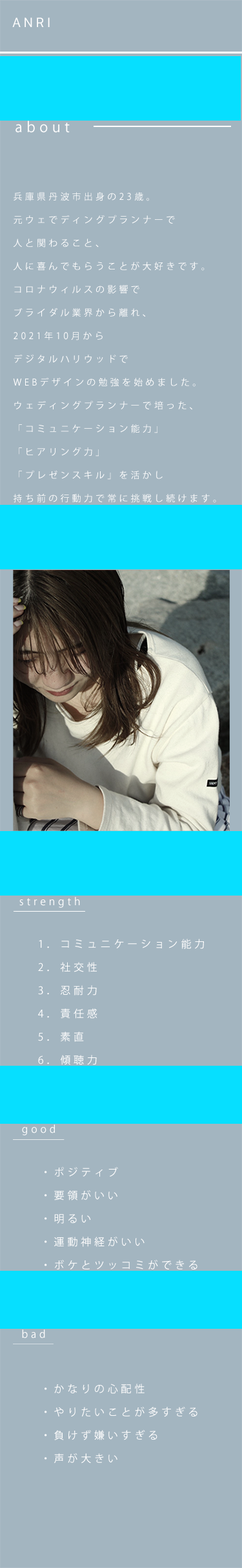
<style>
.page{position:relative;width:242px;height:1568px;background:#a3b5c0}
.page>*{position:absolute;margin:0}
.t1{font:12.9px "Galvji";letter-spacing:0.2em;color:#ffffff}
.t2{font:14.2px "KozGoPr6N-Regular";letter-spacing:0.3em;color:#ffffff}
.t3{font:9px/23.2px "KozGoPr6N-Regular";letter-spacing:0.3em;color:#ffffff}
.t4{font:10.3px "KozGoPr6N-Regular";letter-spacing:0.3em;color:#ffffff}
.t5{font:10.3px/23.2px "KozGoPr6N-Regular";letter-spacing:0.3em;color:#ffffff}
</style>
<div class="page">
<p class="t1" style="left:12px;top:17px;width:38px;height:10px">ANRI</p>
<p class="t2" style="left:15px;top:121px;width:55px;height:12px">about</p>
<p class="t3" style="left:13px;top:192px;width:203px;height:311px">兵庫県丹波市出身の23歳。<br>元ウェでディングプランナーで<br>人と関わること、<br>人に喜んでもらうことが大好きです。<br>コロナウィルスの影響で<br>ブライダル業界から離れ、<br>2021年10月から<br>デジタルハリウッドで<br>WEBデザインの勉強を始めました。<br>ウェディングプランナーで培った、<br>「コミュニケーション能力」<br>「ヒアリング力」<br>「プレゼンスキル」を活かし<br>持ち前の行動力で常に挑戦し続けます。</p>
<p class="t4" style="left:19px;top:897px;width:61px;height:11px">strength</p>
<p class="t5" style="left:38px;top:939px;width:166px;height:126px">1．コミュニケーション能力<br>2．社交性<br>3．忍耐力<br>4．責任感<br>5．素直<br>6．傾聴力</p>
<p class="t4" style="left:22px;top:1124px;width:33px;height:11px">good</p>
<p class="t5" style="left:44px;top:1167px;width:153px;height:102px">・ポジティブ<br>・要領がいい<br>・明るい<br>・運動神経がいい<br>・ボケとツッコミができる</p>
<p class="t4" style="left:22px;top:1329px;width:23px;height:9px">bad</p>
<p class="t5" style="left:44px;top:1384px;width:153px;height:80px">・かなりの心配性<br>・やりたいことが多すぎる<br>・負けず嫌いすぎる<br>・声が大きい</p>
</div>
